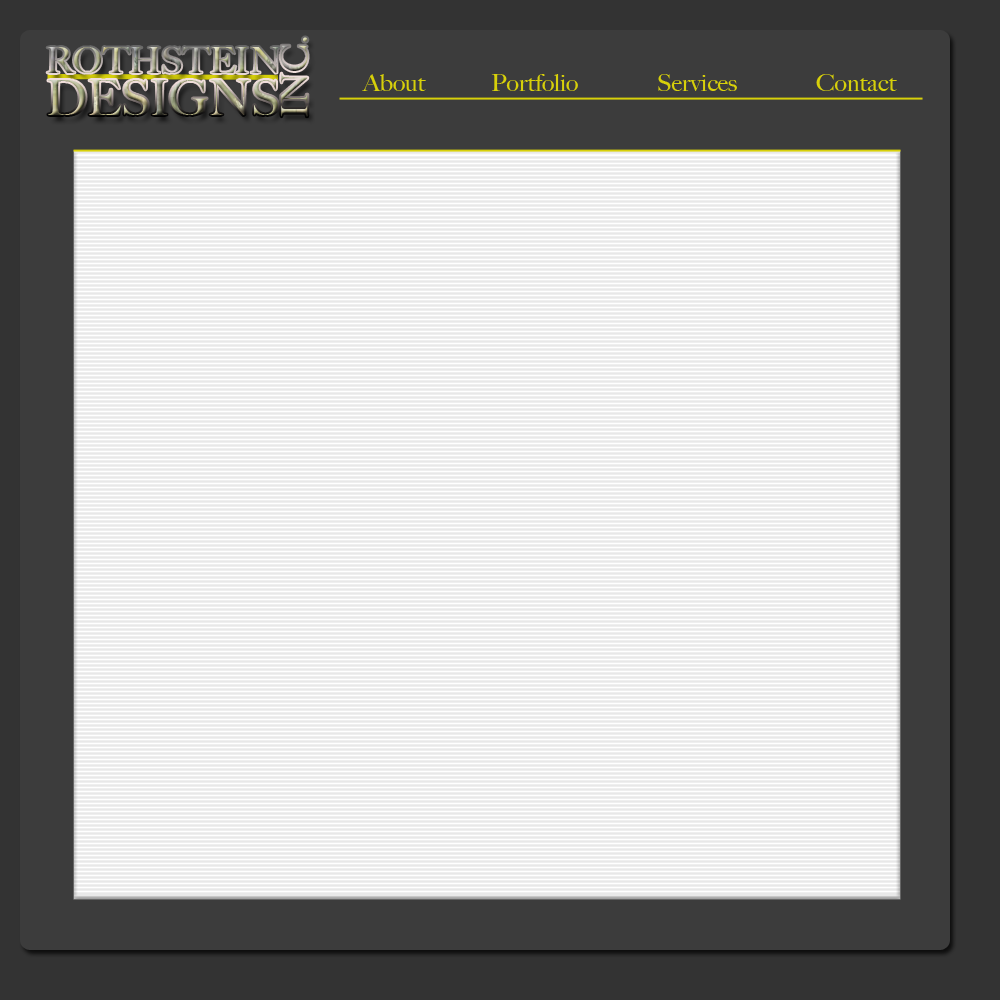
<style>
.page{position:relative;width:1000px;height:1000px;background:#efefef}
.page>*{position:absolute;margin:0}
.t1{font:24px "BigCaslon-Medium";color:#d7d00a}
</style>
<div class="page">
<p class="t1" style="left:362px;top:74px;width:64px;height:17px">About</p>
<p class="t1" style="left:491px;top:74px;width:87px;height:17px">Portfolio</p>
<p class="t1" style="left:658px;top:74px;width:79px;height:17px">Services</p>
<p class="t1" style="left:816px;top:74px;width:81px;height:17px">Contact</p>
</div>
